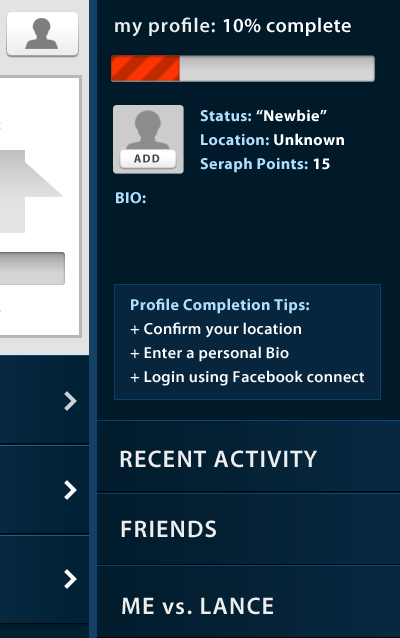
<style>
.page{position:relative;width:400px;height:638px;background:#011a2a}
.page>*{position:absolute;margin:0}
.t1{font:20px "MyriadPro-Semibold";letter-spacing:0.025em;color:#ffffff}
.t2{font:20px "MyriadPro-Semibold";letter-spacing:0.05em;color:#eeeeee}
.t3{font:16px/24px "MyriadPro-Bold";letter-spacing:0.025em;color:#b0deff}
.t4{font:16px/24px "MyriadPro-Bold";letter-spacing:0.025em;color:#ffffff}
.t5{font:11.5px "MyriadPro-Bold";letter-spacing:0.1em;color:#444444;text-transform:uppercase}
.t6{font:16px "MyriadPro-Bold";letter-spacing:0.025em;color:#b0deff}
.t7{font:16px/24px "MyriadPro-Semibold";letter-spacing:0.025em;color:#fefefe}
.t8{font:24px "MyriadPro-Semibold";letter-spacing:0.05em;color:#eeeeee}
</style>
<div class="page">
<p class="t1" style="left:115px;top:17px;width:236px;height:20px"><span class="t2">my profile: </span>10% complete</p>
<p class="t3" style="left:200px;top:109px;width:144px;height:64px">Status:<span class="t4"> “Newbie”<br></span>Location:<span class="t4"> Unknown<br></span>Seraph Points:<span class="t4"> 15</span></p>
<p class="t5" style="left:134px;top:154px;width:26px;height:9px">ADD</p>
<p class="t6" style="left:116px;top:192px;width:30px;height:12px">BIO:</p>
<p class="t7" style="left:130px;top:298px;width:234px;height:88px"><span class="t3">Profile Completion Tips:<br></span>+ Confirm your location<br>+ Enter a personal Bio<br>+ Login using Facebook connect</p>
<p class="t8" style="left:120px;top:450px;width:197px;height:18px">RECENT ACTIVITY</p>
<p class="t8" style="left:121px;top:520px;width:95px;height:18px">FRIENDS</p>
<p class="t8" style="left:122px;top:597px;width:151px;height:18px">ME vs. LANCE</p>
</div>
